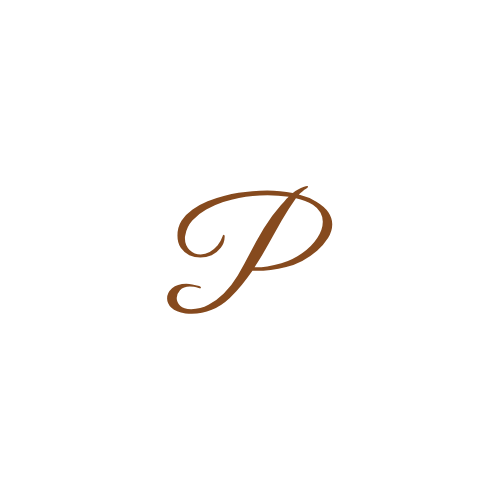
<style>
.page{position:relative;width:500px;height:500px;background:#ffffff}
.page>*{position:absolute;margin:0}
.t1{font:150px "GreatVibes-Regular";color:#864a1e}
</style>
<div class="page">
<p class="t1" style="left:167px;top:185px;width:166px;height:129px">P</p>
</div>
